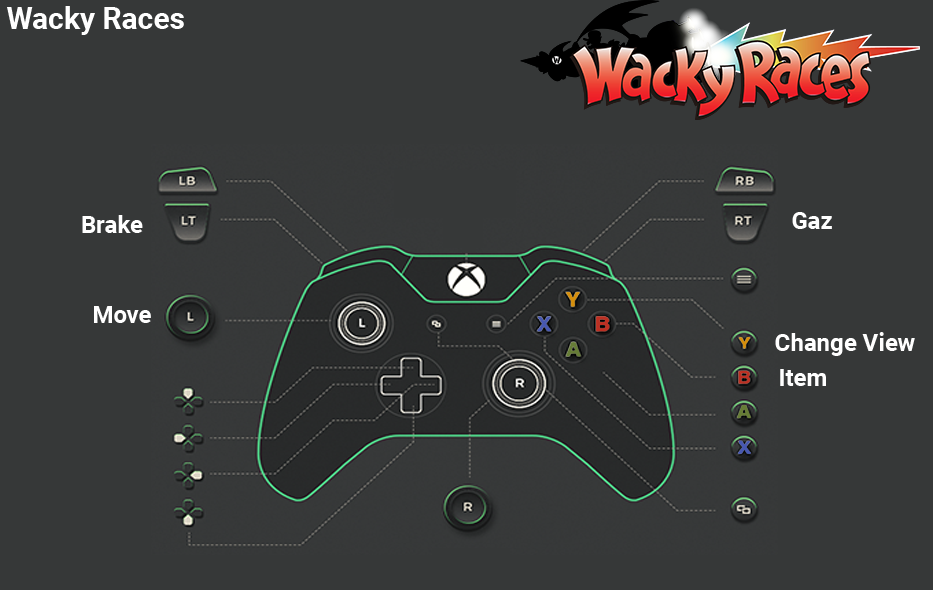
<style>
.page{position:relative;width:933px;height:590px;background:#363838}
.page>*{position:absolute;margin:0}
.t1{font:30px "Roboto-Bold";color:#ffffff}
.t2{font:24px "Roboto-Bold";color:#ffffff}
</style>
<div class="page">
<p class="t1" style="left:7px;top:6px;width:177px;height:29px">Wacky Races</p>
<p class="t2" style="left:82px;top:215px;width:61px;height:18px">Brake</p>
<p class="t2" style="left:792px;top:212px;width:40px;height:17px">Gaz</p>
<p class="t2" style="left:94px;top:306px;width:57px;height:17px">Move</p>
<p class="t2" style="left:775px;top:332px;width:140px;height:24px">Change View</p>
<p class="t2" style="left:780px;top:369px;width:46px;height:17px">Item</p>
</div>
